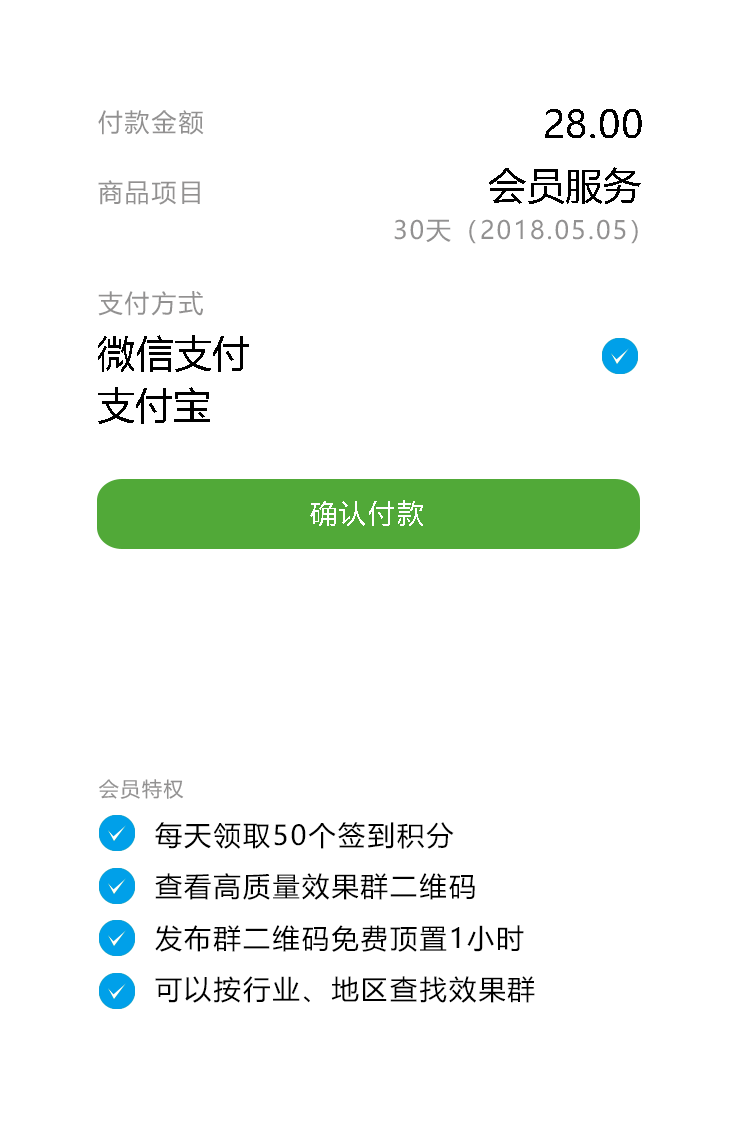
<style>
.page{position:relative;width:740px;height:1136px;background:#ffffff}
.page>*{position:absolute;margin:0}
.t1{font:25px "MicrosoftYaHei";letter-spacing:0.08em;color:#929191}
.t2{font:38px "MicrosoftYaHei";color:#000000}
.t3{font:27.3px "MicrosoftYaHei";letter-spacing:0.08em;color:#ffffff}
.t4{font:20px "MicrosoftYaHei";letter-spacing:0.08em;color:#929191}
.t5{font:27.3px "MicrosoftYaHei";letter-spacing:0.08em;color:#000000}
</style>
<div class="page">
<p class="t1" style="left:98px;top:110px;width:106px;height:25px">付款金额</p>
<p class="t2" style="left:545px;top:109px;width:97px;height:29px">28.00</p>
<p class="t2" style="left:489px;top:167px;width:152px;height:37px">会员服务</p>
<p class="t1" style="left:98px;top:180px;width:102px;height:25px">商品项目</p>
<p class="t1" style="left:394px;top:219px;width:244px;height:25px">30天（2018.05.05）</p>
<p class="t1" style="left:98px;top:291px;width:105px;height:25px">支付方式</p>
<p class="t2" style="left:98px;top:335px;width:151px;height:37px">微信支付</p>
<p class="t2" style="left:98px;top:387px;width:112px;height:37px">支付宝</p>
<p class="t3" style="left:310px;top:500px;width:113px;height:26px">确认付款</p>
<p class="t4" style="left:99px;top:779px;width:85px;height:20px">会员特权</p>
<p class="t5" style="left:155px;top:822px;width:299px;height:27px">每天领取50个签到积分</p>
<p class="t5" style="left:155px;top:873px;width:320px;height:27px">查看高质量效果群二维码</p>
<p class="t5" style="left:155px;top:925px;width:369px;height:27px">发布群二维码免费顶置1小时</p>
<p class="t5" style="left:155px;top:976px;width:380px;height:27px">可以按行业、地区查找效果群</p>
</div>
